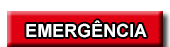
<style>
.page{position:relative;width:170px;height:47px;background:#ffffff}
.page>*{position:absolute;margin:0}
.t1{font:18px "Arial-BoldMT";color:#ffffff}
</style>
<div class="page">
<p class="t1" style="left:26px;top:20px;width:121px;height:18px">EMERGÊNCIA</p>
</div>
